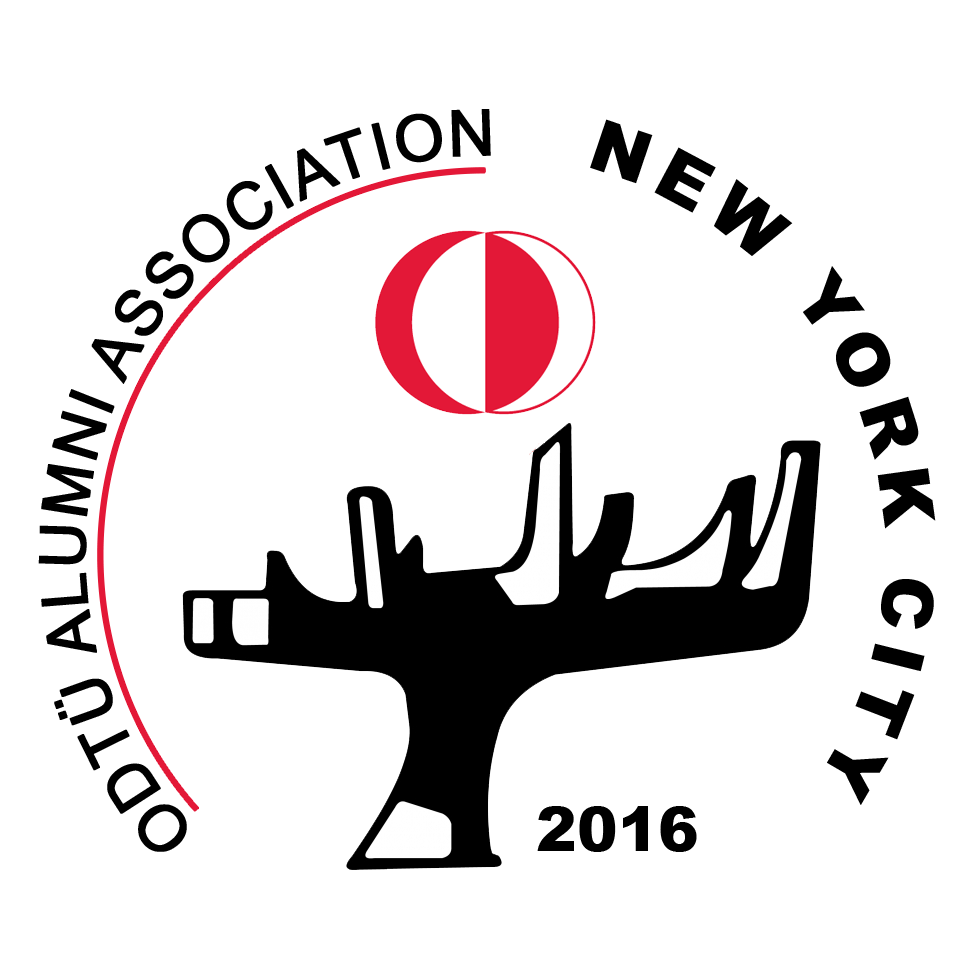
<style>
.page{position:relative;width:970px;height:970px;background:#ffffff}
.page>*{position:absolute;margin:0}
.t1{font:64px "ArialMT";letter-spacing:0.015em;color:#000000;font-weight:bold}
.t2{font:61px "ArialMT";letter-spacing:0.006em;color:#000000;font-weight:bold}
.t3{font:71px "Arial-Black";letter-spacing:0.145em;color:#000000}
.t4{font:71px "Arial-Black";color:#000000;scale:1.1 1}
.t5{font:61px "Arial-Black";color:#000000}
</style>
<div class="page">
<p class="t1" style="left:38px;top:109px;width:453px;height:743px"><span class="t2">                 </span>ODTÜ ALUMNI ASSOCIATION</p>
<p class="t3" style="left:590px;top:119px;width:346px;height:686px"><span class="t4">                                                   </span>NEW YORK CITY</p>
<p class="t5" style="left:537px;top:806px;width:160px;height:46px">2016</p>
</div>
